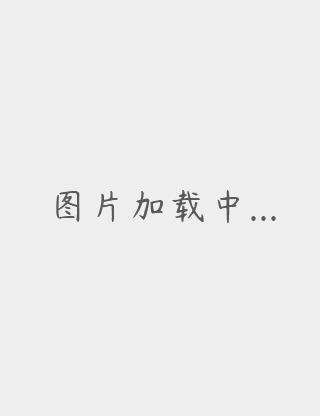
<style>
.page{position:relative;width:320px;height:416px;background:#eeeeee}
.page>*{position:absolute;margin:0}
.t1{font:36px "YRDZST-Regular";letter-spacing:0.11em;color:#5b595b}
</style>
<div class="page">
<p class="t1" style="left:56px;top:190px;width:220px;height:33px">图片加载中...</p>
</div>
